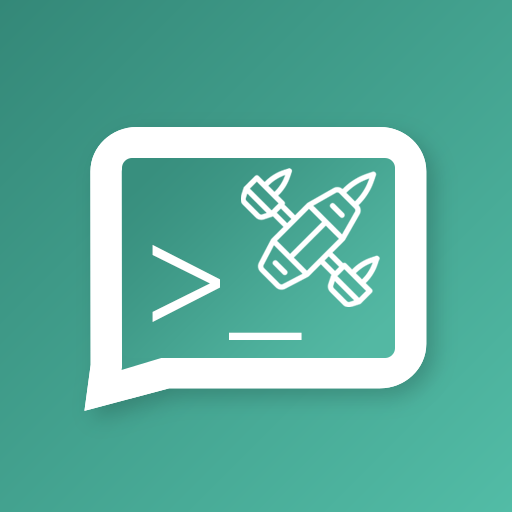
<style>
.page{position:relative;width:512px;height:512px}
.page>*{position:absolute;margin:0}
.t1{font:145px "MyriadPro-Regular";color:#ffffff}
</style>
<div class="page">
<p class="t1" style="left:152px;top:244px;width:150px;height:96px">&gt;_</p>
</div>
